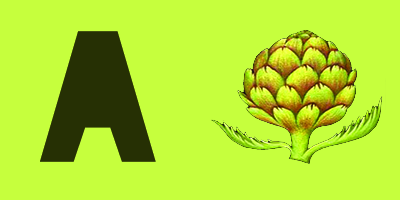
<style>
.page{position:relative;width:400px;height:200px;background:#c6ff3d}
.page>*{position:absolute;margin:0}
.t1{font:175px "Blackout-Midnight";color:#263004}
</style>
<div class="page">
<p class="t1" style="left:40px;top:31px;width:116px;height:131px">A</p>
</div>
